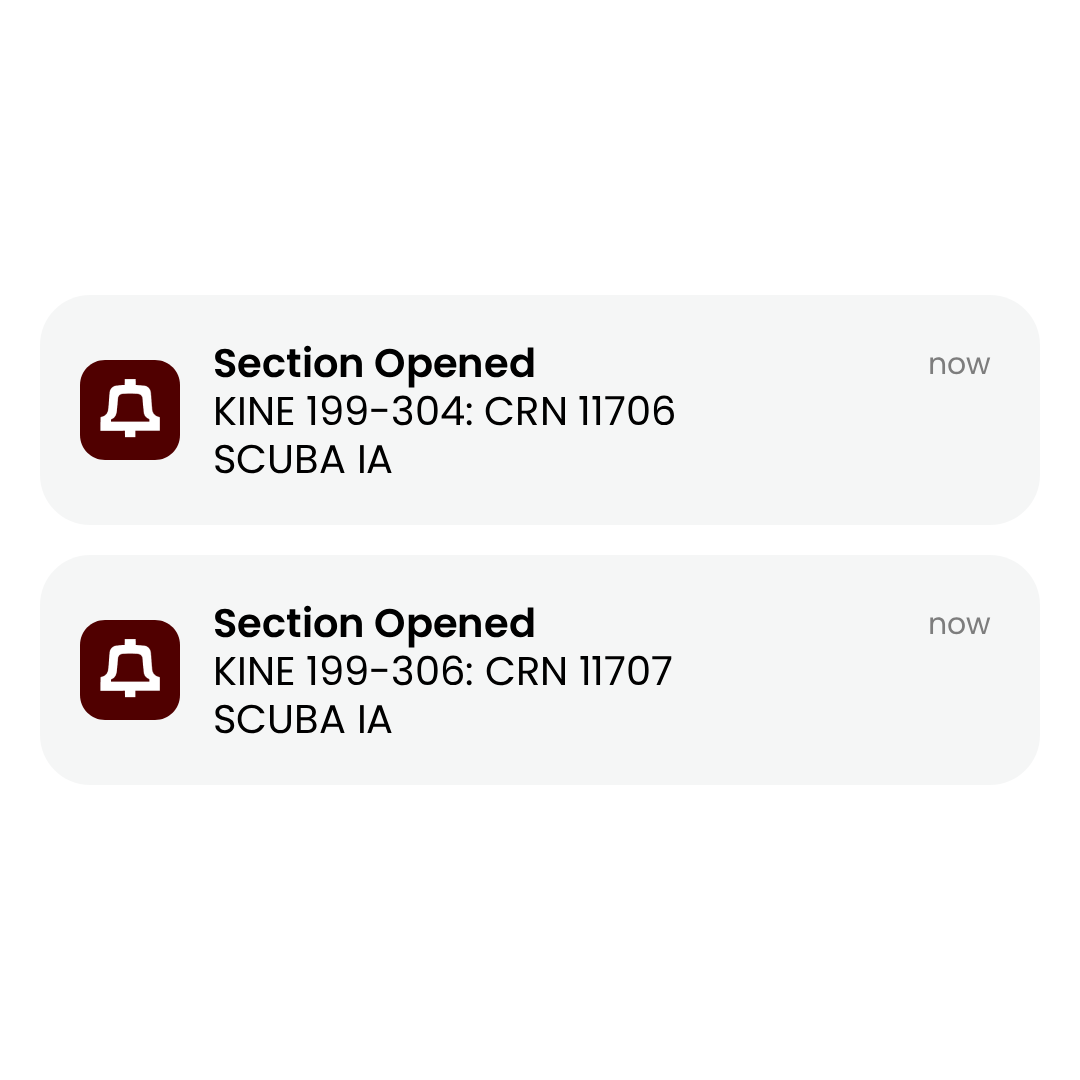
<style>
.page{position:relative;width:1080px;height:1080px;background:#ffffff}
.page>*{position:absolute;margin:0}
.t1{font:40px "Poppins-Regular";color:#000000}
.t2{font:40px "Poppins-SemiBold";color:#000000}
.t3{font:30px "Poppins-Regular";color:#7d7d7d}
</style>
<div class="page">
<p class="t1" style="left:215px;top:345px;width:459px;height:129px"><span class="t2">Section Opened<br></span>KINE 199-304: CRN 11706<br>SCUBA IA</p>
<p class="t3" style="left:930px;top:357px;width:61px;height:18px">now</p>
<p class="t1" style="left:215px;top:605px;width:457px;height:129px"><span class="t2">Section Opened<br></span>KINE 199-306: CRN 11707<br>SCUBA IA</p>
<p class="t3" style="left:930px;top:617px;width:61px;height:18px">now</p>
</div>
